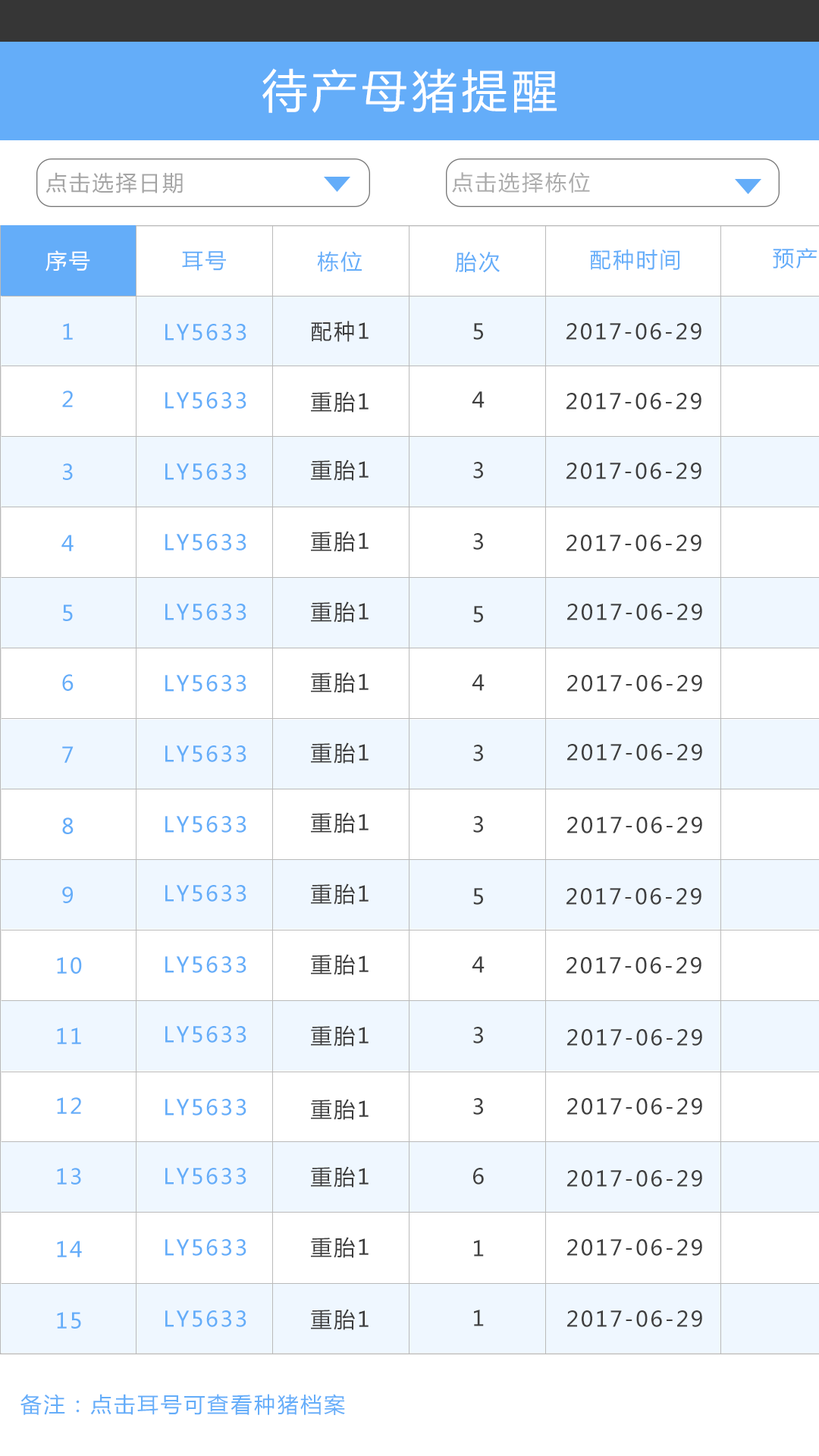
<style>
.page{position:relative;width:819px;height:1456px;background:#ffffff}
.page>*{position:absolute;margin:0}
.t1{font:45.5px "MicrosoftYaHei";letter-spacing:0.1em;color:#ffffff}
.t2{font:21.2px "MicrosoftYaHei";letter-spacing:0.1em;color:#a4a4a4}
.t3{font:21.2px "MicrosoftYaHei";letter-spacing:0.1em;color:#acacac}
.t4{font:21.2px "MicrosoftYaHei";letter-spacing:0.1em;color:#ffffff}
.t5{font:21.2px "MicrosoftYaHei";letter-spacing:0.1em;color:#64adf9}
.t6{font:21.2px "MicrosoftYaHei";letter-spacing:0.1em;color:#3c3c3c}
.t7{font:21.2px "MicrosoftYaHei";letter-spacing:0.1em;color:#3f3f3f}
</style>
<div class="page">
<p class="t1" style="left:262px;top:68px;width:295px;height:45px">待产母猪提醒</p>
<p class="t2" style="left:45px;top:172px;width:138px;height:21px">点击选择日期</p>
<p class="t3" style="left:452px;top:172px;width:138px;height:21px">点击选择栋位</p>
<p class="t4" style="left:45px;top:250px;width:45px;height:21px">序号</p>
<p class="t5" style="left:182px;top:251px;width:44px;height:20px">耳号</p>
<p class="t5" style="left:317px;top:251px;width:45px;height:21px">栋位</p>
<p class="t5" style="left:455px;top:252px;width:45px;height:21px">胎次</p>
<p class="t5" style="left:590px;top:249px;width:89px;height:21px">配种时间</p>
<p class="t5" style="left:773px;top:248px;width:44px;height:21px">预产</p>
<p class="t5" style="left:63px;top:323px;width:10px;height:17px">1</p>
<p class="t5" style="left:165px;top:324px;width:81px;height:16px">LY5633</p>
<p class="t6" style="left:311px;top:321px;width:58px;height:21px">配种1</p>
<p class="t7" style="left:473px;top:323px;width:10px;height:17px">5</p>
<p class="t7" style="left:566px;top:323px;width:135px;height:17px">2017-06-29</p>
<p class="t5" style="left:62px;top:391px;width:11px;height:16px">2</p>
<p class="t5" style="left:165px;top:392px;width:81px;height:17px">LY5633</p>
<p class="t6" style="left:311px;top:391px;width:58px;height:22px">重胎1</p>
<p class="t7" style="left:472px;top:391px;width:13px;height:17px">4</p>
<p class="t7" style="left:566px;top:393px;width:135px;height:16px">2017-06-29</p>
<p class="t6" style="left:311px;top:460px;width:58px;height:21px">重胎1</p>
<p class="t7" style="left:473px;top:462px;width:10px;height:17px">3</p>
<p class="t5" style="left:63px;top:463px;width:10px;height:17px">3</p>
<p class="t5" style="left:165px;top:463px;width:81px;height:17px">LY5633</p>
<p class="t7" style="left:566px;top:463px;width:135px;height:16px">2017-06-29</p>
<p class="t5" style="left:165px;top:534px;width:81px;height:17px">LY5633</p>
<p class="t6" style="left:311px;top:531px;width:58px;height:21px">重胎1</p>
<p class="t7" style="left:473px;top:533px;width:10px;height:17px">3</p>
<p class="t5" style="left:61px;top:535px;width:13px;height:16px">4</p>
<p class="t7" style="left:566px;top:535px;width:135px;height:16px">2017-06-29</p>
<p class="t5" style="left:63px;top:604px;width:10px;height:17px">5</p>
<p class="t5" style="left:165px;top:604px;width:81px;height:16px">LY5633</p>
<p class="t6" style="left:311px;top:601px;width:58px;height:22px">重胎1</p>
<p class="t7" style="left:473px;top:606px;width:10px;height:17px">5</p>
<p class="t7" style="left:567px;top:604px;width:135px;height:16px">2017-06-29</p>
<p class="t5" style="left:62px;top:674px;width:12px;height:17px">6</p>
<p class="t5" style="left:165px;top:675px;width:81px;height:17px">LY5633</p>
<p class="t6" style="left:311px;top:672px;width:58px;height:21px">重胎1</p>
<p class="t7" style="left:472px;top:674px;width:13px;height:17px">4</p>
<p class="t7" style="left:567px;top:675px;width:135px;height:17px">2017-06-29</p>
<p class="t5" style="left:62px;top:746px;width:12px;height:17px">7</p>
<p class="t5" style="left:165px;top:745px;width:81px;height:17px">LY5633</p>
<p class="t6" style="left:311px;top:742px;width:58px;height:22px">重胎1</p>
<p class="t7" style="left:473px;top:745px;width:10px;height:16px">3</p>
<p class="t7" style="left:567px;top:744px;width:135px;height:17px">2017-06-29</p>
<p class="t5" style="left:62px;top:817px;width:12px;height:17px">8</p>
<p class="t5" style="left:165px;top:816px;width:81px;height:17px">LY5633</p>
<p class="t6" style="left:311px;top:812px;width:58px;height:21px">重胎1</p>
<p class="t7" style="left:473px;top:816px;width:10px;height:17px">3</p>
<p class="t7" style="left:567px;top:817px;width:135px;height:16px">2017-06-29</p>
<p class="t5" style="left:62px;top:886px;width:11px;height:17px">9</p>
<p class="t5" style="left:165px;top:885px;width:81px;height:17px">LY5633</p>
<p class="t6" style="left:311px;top:883px;width:58px;height:22px">重胎1</p>
<p class="t7" style="left:473px;top:888px;width:10px;height:17px">5</p>
<p class="t7" style="left:566px;top:888px;width:135px;height:17px">2017-06-29</p>
<p class="t6" style="left:311px;top:954px;width:58px;height:21px">重胎1</p>
<p class="t5" style="left:57px;top:957px;width:25px;height:17px">10</p>
<p class="t5" style="left:165px;top:956px;width:81px;height:17px">LY5633</p>
<p class="t7" style="left:472px;top:956px;width:13px;height:17px">4</p>
<p class="t7" style="left:566px;top:957px;width:135px;height:17px">2017-06-29</p>
<p class="t6" style="left:311px;top:1025px;width:58px;height:21px">重胎1</p>
<p class="t5" style="left:57px;top:1028px;width:24px;height:16px">11</p>
<p class="t5" style="left:165px;top:1026px;width:81px;height:17px">LY5633</p>
<p class="t7" style="left:473px;top:1027px;width:10px;height:16px">3</p>
<p class="t7" style="left:567px;top:1029px;width:135px;height:17px">2017-06-29</p>
<p class="t5" style="left:57px;top:1097px;width:24px;height:17px">12</p>
<p class="t5" style="left:165px;top:1099px;width:81px;height:16px">LY5633</p>
<p class="t6" style="left:311px;top:1099px;width:58px;height:21px">重胎1</p>
<p class="t7" style="left:473px;top:1098px;width:10px;height:17px">3</p>
<p class="t7" style="left:567px;top:1098px;width:135px;height:17px">2017-06-29</p>
<p class="t5" style="left:57px;top:1168px;width:24px;height:17px">13</p>
<p class="t5" style="left:165px;top:1168px;width:81px;height:17px">LY5633</p>
<p class="t6" style="left:311px;top:1166px;width:58px;height:22px">重胎1</p>
<p class="t7" style="left:473px;top:1168px;width:11px;height:17px">6</p>
<p class="t7" style="left:567px;top:1170px;width:135px;height:17px">2017-06-29</p>
<p class="t5" style="left:57px;top:1241px;width:25px;height:16px">14</p>
<p class="t5" style="left:165px;top:1239px;width:81px;height:17px">LY5633</p>
<p class="t6" style="left:311px;top:1237px;width:58px;height:21px">重胎1</p>
<p class="t7" style="left:474px;top:1240px;width:10px;height:17px">1</p>
<p class="t7" style="left:567px;top:1239px;width:135px;height:17px">2017-06-29</p>
<p class="t5" style="left:57px;top:1312px;width:24px;height:17px">15</p>
<p class="t5" style="left:165px;top:1310px;width:81px;height:17px">LY5633</p>
<p class="t6" style="left:311px;top:1309px;width:58px;height:21px">重胎1</p>
<p class="t7" style="left:474px;top:1310px;width:10px;height:16px">1</p>
<p class="t7" style="left:567px;top:1310px;width:135px;height:17px">2017-06-29</p>
<p class="t5" style="left:20px;top:1394px;width:325px;height:21px">备注：点击耳号可查看种猪档案</p>
</div>
